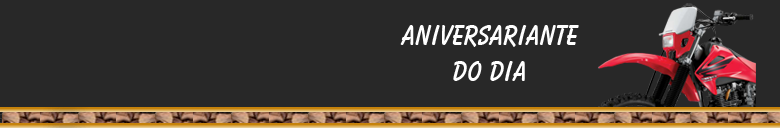
<style>
.page{position:relative;width:780px;height:128px;background:#282828}
.page>*{position:absolute;margin:0}
.t1{font:30px "BalloonBT-Bold";color:#ffffff}
</style>
<div class="page">
<p class="t1" style="left:400px;top:25px;width:179px;height:56px;text-align:center">Aniversariante<br>do dia</p>
</div>
